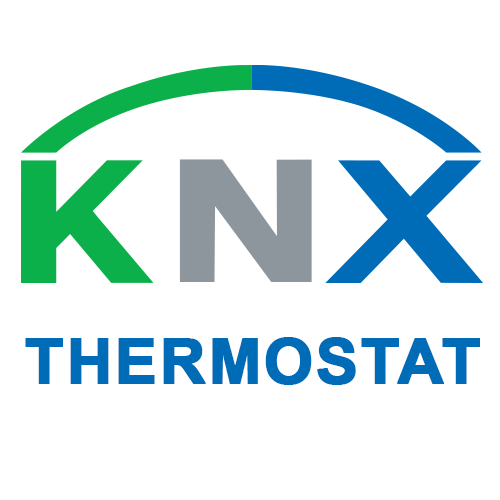
<style>
.page{position:relative;width:500px;height:500px;background:#ffffff}
.page>*{position:absolute;margin:0}
.t1{font:63px "Arial-BoldMT";letter-spacing:0.02em;color:#006bb6;text-transform:uppercase;font-weight:bold}
</style>
<div class="page">
<p class="t1" style="left:25px;top:337px;width:455px;height:48px">Thermostat</p>
</div>
